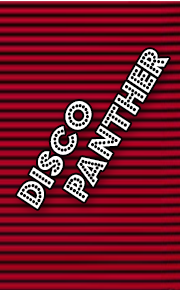
<style>
.page{position:relative;width:180px;height:290px}
.page>*{position:absolute;margin:0}
.t1{font:30.3px "BudmoJiggler";color:#ffffff;scale:1.1 1}
</style>
<div class="page">
<p class="t1" style="left:17px;top:49px;width:152px;height:160px;rotate:-60deg">DISCo<br>   PANTHER</p>
</div>
